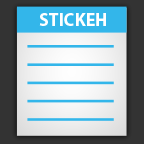
<style>
.page{position:relative;width:144px;height:144px}
.page>*{position:absolute;margin:0}
.t1{font:18px "MyriadPro-Bold";color:#ffffff}
</style>
<div class="page">
<p class="t1" style="left:39px;top:13px;width:67px;height:13px">STICKEH</p>
</div>
